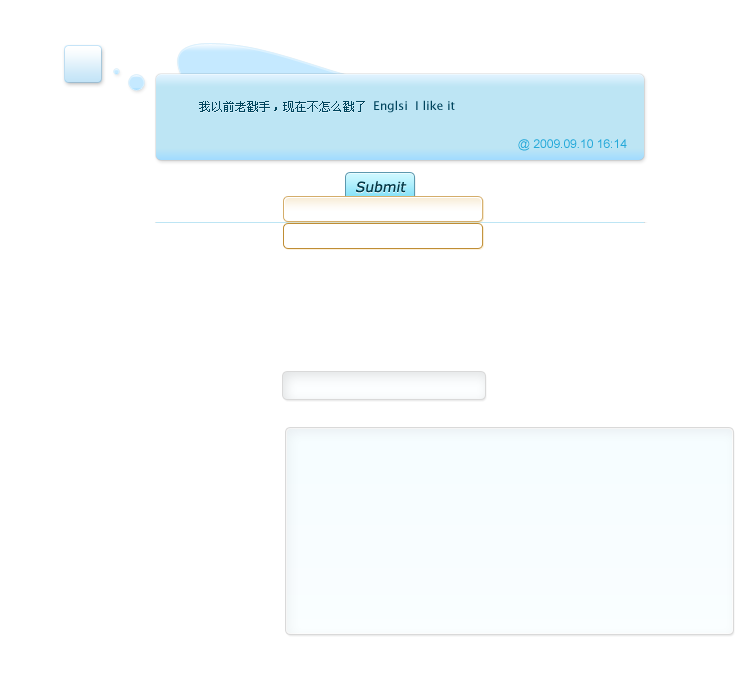
<style>
.page{position:relative;width:750px;height:700px;background:#ffffff}
.page>*{position:absolute;margin:0}
.t1{font:12px "SimSun";color:#00445d}
.t2{font:12px "LucidaSansUnicode";color:#00445d}
.t3{font:12px "ArialMT";color:#25a9d9}
.t4{font:14px "Verdana";color:#04475b;font-style:italic}
.t5{font:14px "Verdana";color:#033847;font-style:italic}
</style>
<div class="page">
<p class="t1" style="left:199px;top:101px;width:166px;height:11px">我以前老戳手，现在不怎么戳了</p>
<p class="t2" style="left:374px;top:100px;width:81px;height:13px">Englsi  I like it</p>
<p class="t3" style="left:518px;top:139px;width:109px;height:12px">@ 2009.09.10 16:14</p>
<p class="t4" style="left:356px;top:181px;width:51px;height:12px">Submit</p>
<p class="t5" style="left:356px;top:181px;width:51px;height:12px">Submit</p>
</div>
